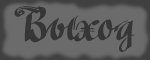
<style>
.page{position:relative;width:150px;height:60px;background:#6b6b6b}
.page>*{position:absolute;margin:0}
.t1{font:41.7px "MinusmanC";color:#363636}
</style>
<div class="page">
<p class="t1" style="left:14px;top:6px;width:121px;height:46px">Выход</p>
</div>
